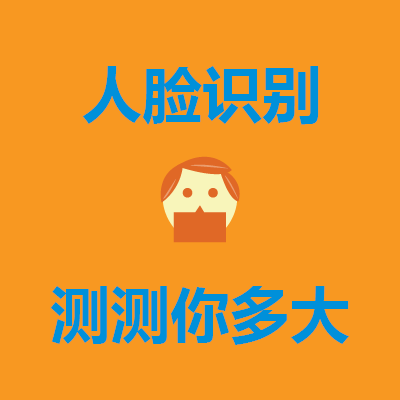
<style>
.page{position:relative;width:400px;height:400px;background:#f89821}
.page>*{position:absolute;margin:0}
.t1{font:60px "MicrosoftYaHei-Bold";color:#0090da}
</style>
<div class="page">
<p class="t1" style="left:82px;top:66px;width:237px;height:59px">人脸识别</p>
<p class="t1" style="left:50px;top:286px;width:299px;height:59px">测测你多大</p>
</div>
